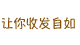
<style>
.page{position:relative;width:80px;height:45px;background:#ffffff}
.page>*{position:absolute;margin:0}
.t1{font:12.5px "HannotateSC-W7";color:#855005}
</style>
<div class="page">
<p class="t1" style="left:1px;top:17px;width:74px;height:13px">让你收发自如</p>
</div>
